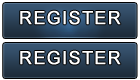
<style>
.page{position:relative;width:140px;height:80px}
.page>*{position:absolute;margin:0}
.t1{font:18px "ArialMT";letter-spacing:0.05em;color:#ffffff;font-weight:bold}
</style>
<div class="page">
<p class="t1" style="left:20px;top:10px;width:101px;height:15px">REGISTER</p>
</div>
